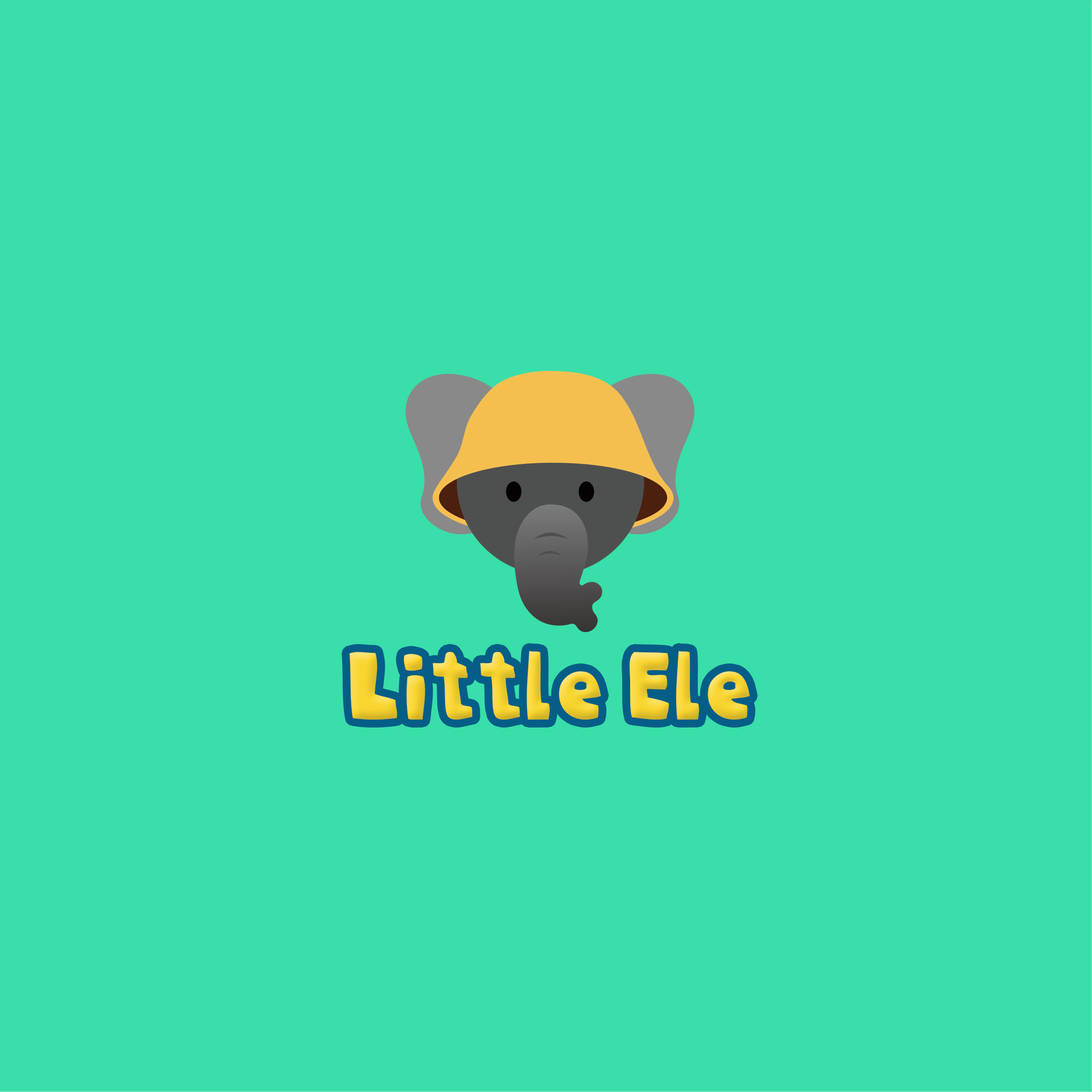
<style>
.page{position:relative;width:1092px;height:1092px;background:#39deaa}
.page>*{position:absolute;margin:0}
.t1{font:96.5px "Basic-Trip"}
.t2{font:96.5px "Basic-Trip";letter-spacing:0.22em}
</style>
<div class="page">
<p class="t1" style="left:349px;top:651px;width:401px;height:69px">Littl<span class="t2">e</span>Ele</p>
</div>
